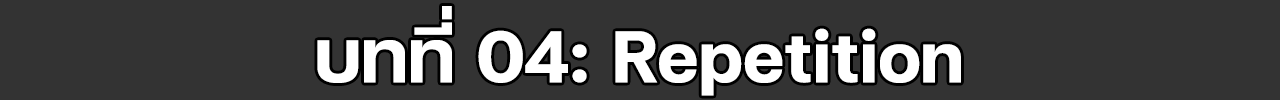
<style>
.page{position:relative;width:1280px;height:100px;background:#333333}
.page>*{position:absolute;margin:0}
.t1{font:100px "FCMinimalBold";color:#ffffff}
</style>
<div class="page">
<p class="t1" style="left:317px;top:6px;width:644px;height:90px">บทที่ 04: Repetition</p>
</div>
